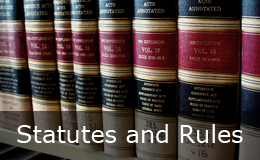
<style>
.page{position:relative;width:260px;height:160px}
.page>*{position:absolute;margin:0}
.t1{font:24px "Verdana";color:#fefefe}
</style>
<div class="page">
<p class="t1" style="left:17px;top:124px;width:226px;height:19px">Statutes and Rules</p>
</div>
